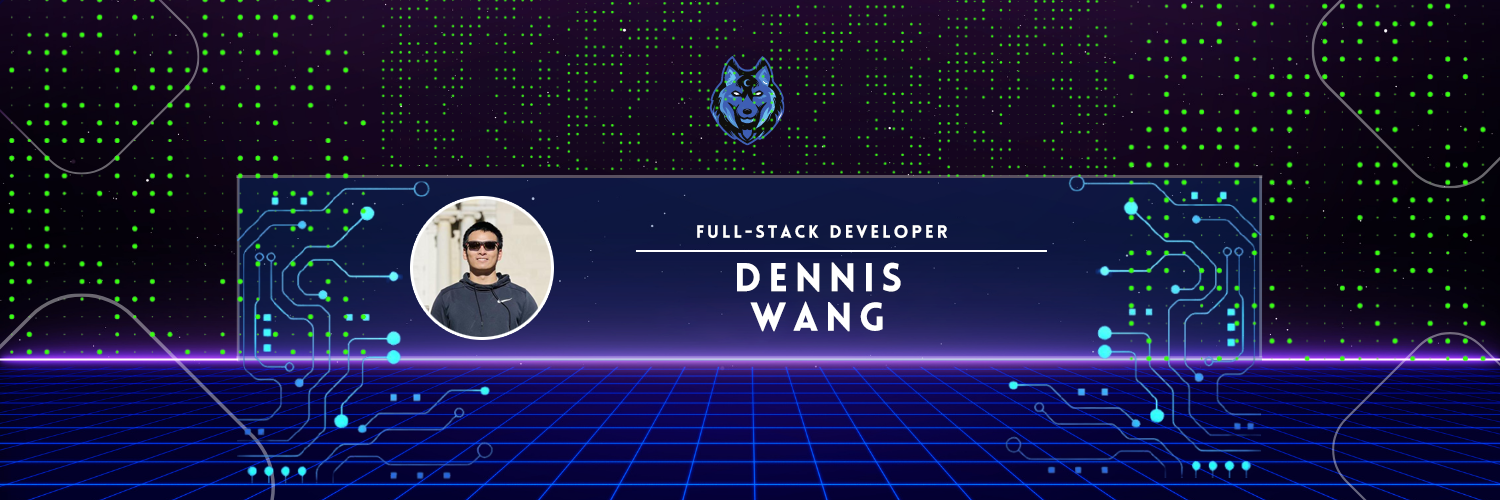
<style>
.page{position:relative;width:1500px;height:500px}
.page>*{position:absolute;margin:0}
.t1{font:17.6px "LoveloBlack";letter-spacing:0.16em;color:#ffffff;text-transform:uppercase}
.t2{font:39.6px/39.5px "LoveloBlack";letter-spacing:0.16em;color:#ffffff;text-transform:uppercase}
</style>
<div class="page">
<p class="t1" style="left:697px;top:224px;width:250px;height:14px">Full-Stack Developer</p>
<p class="t2" style="left:737px;top:262px;width:164px;height:70px;text-align:center">Dennis<br>Wang</p>
</div>
